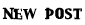
<style>
.page{position:relative;width:85px;height:25px;background:#ffffff}
.page>*{position:absolute;margin:0}
.t1{font:14px "Mest";letter-spacing:0.05em;color:#000000}
</style>
<div class="page">
<p class="t1" style="left:2px;top:7px;width:80px;height:13px">new post</p>
</div>
